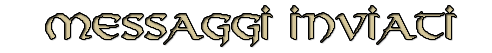
<style>
.page{position:relative;width:492px;height:53px;background:#ffffff}
.page>*{position:absolute;margin:0}
.t1{font:34px "Viking-Normal"}
</style>
<div class="page">
<p class="t1" style="left:46px;top:6px;width:410px;height:40px">MESSAGGI INVIATI</p>
</div>
